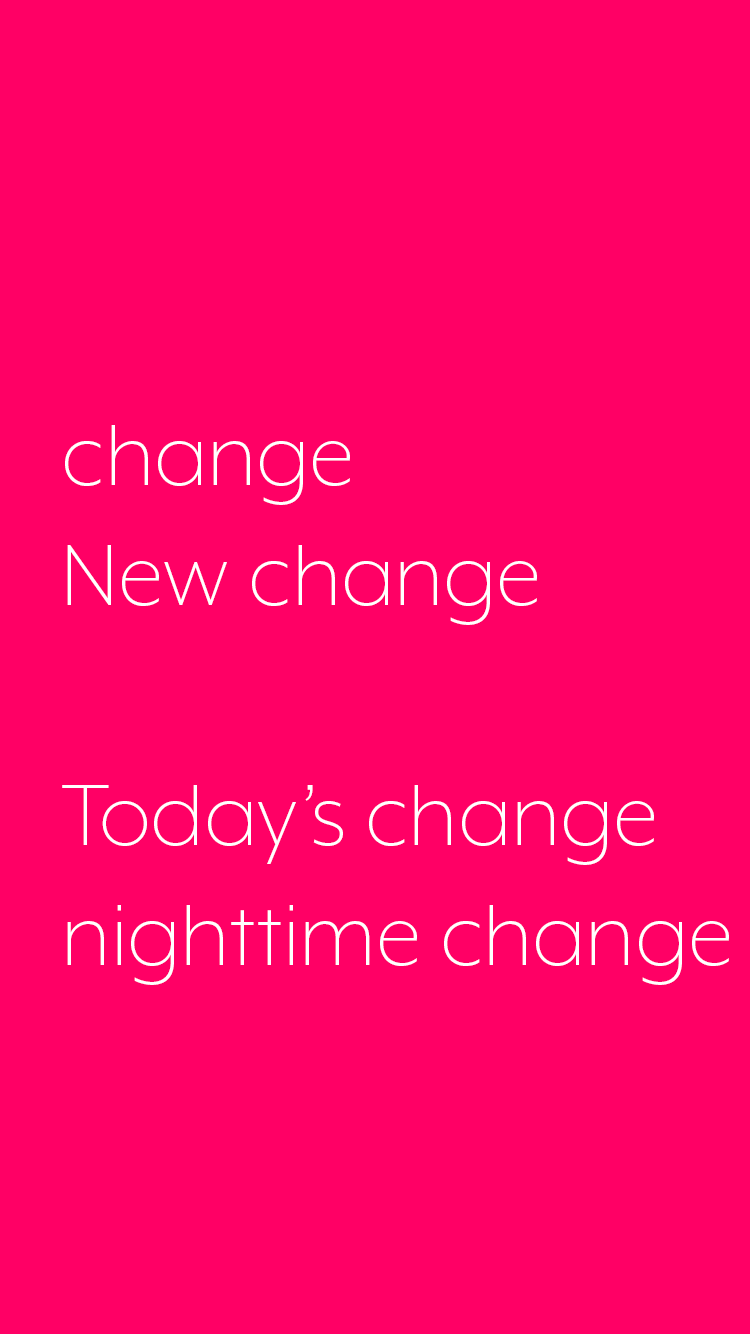
<style>
.page{position:relative;width:750px;height:1334px;background:#ff0065}
.page>*{position:absolute;margin:0}
.t1{font:100px "MrEavesXLModOT-Light";color:#ffffff}
</style>
<div class="page">
<p class="t1" style="left:62px;top:425px;width:667px;height:560px">change<br>New change<br><br>Today’s change<br>nighttime change</p>
</div>
